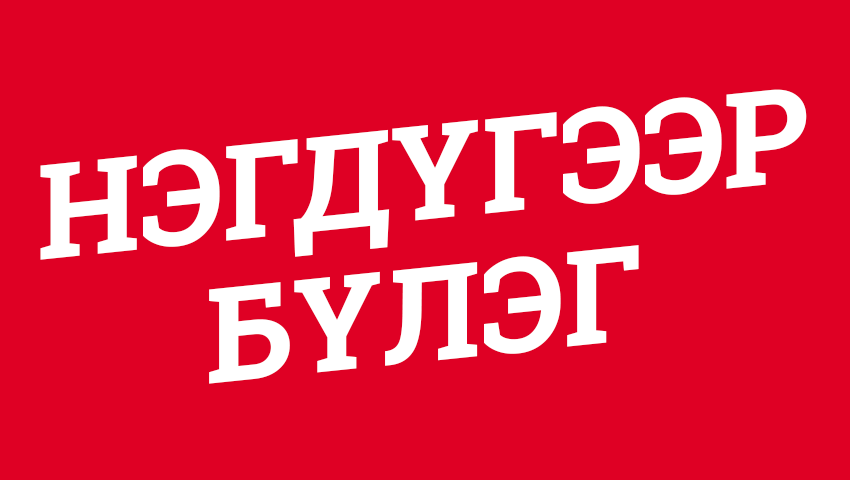
<style>
.page{position:relative;width:850px;height:480px;background:#df0024}
.page>*{position:absolute;margin:0}
.t1{font:132.3px "RobotoSlab-Bold";color:#ffffff}
</style>
<div class="page">
<p class="t1" style="left:40px;top:89px;width:767px;height:171px;rotate:-6deg">НЭГДҮГЭЭР</p>
<p class="t1" style="left:209px;top:245px;width:430px;height:139px;rotate:-6deg">БҮЛЭГ</p>
</div>
